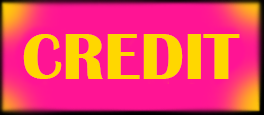
<style>
.page{position:relative;width:264px;height:115px;background:#ff1494}
.page>*{position:absolute;margin:0}
.t1{font:66.7px "BritannicBold";color:#ffd700}
</style>
<div class="page">
<p class="t1" style="left:23px;top:34px;width:217px;height:45px">CREDIT</p>
</div>
